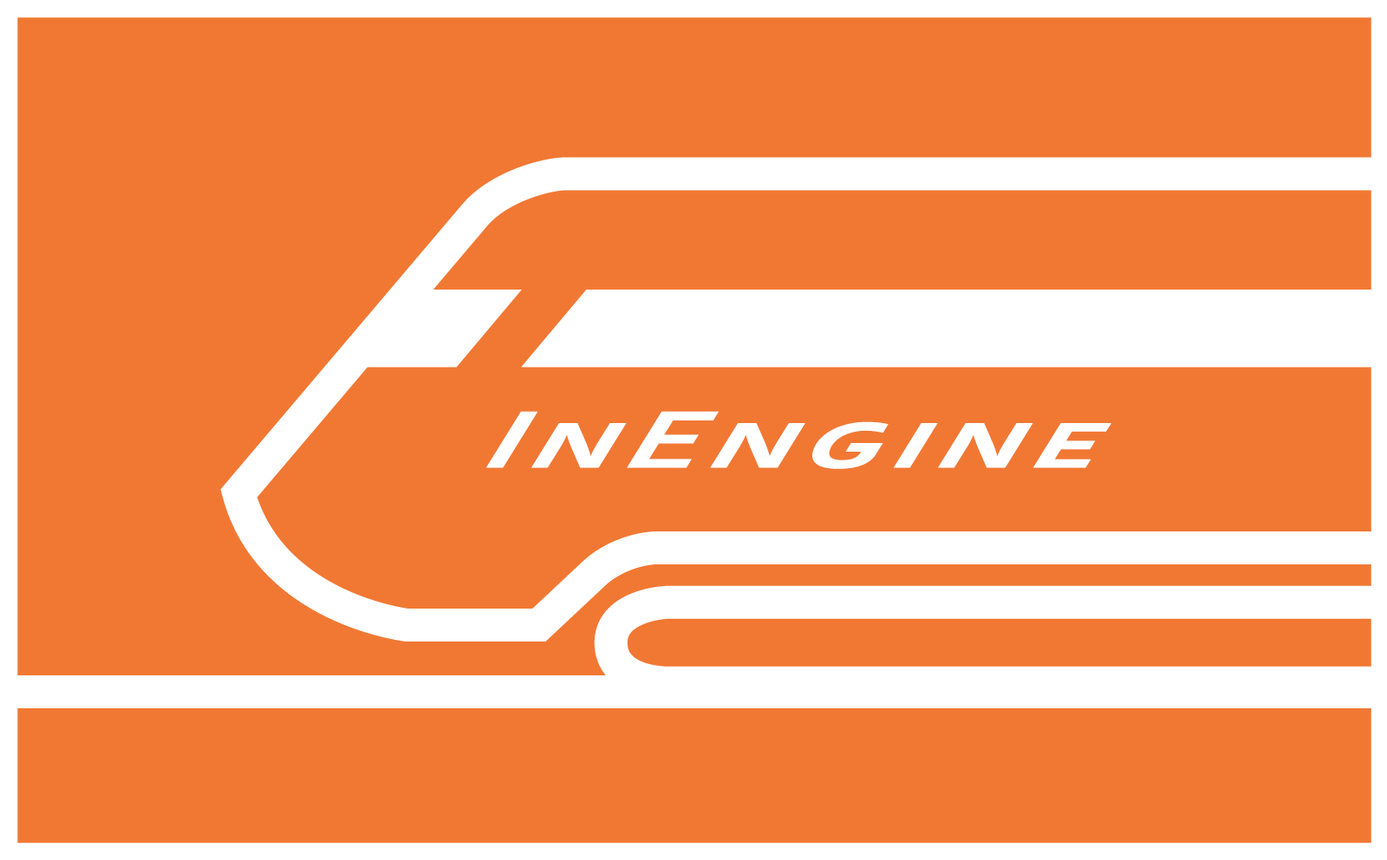
<style>
.page{position:relative;width:1387px;height:860px;background:#f17833}
.page>*{position:absolute;margin:0}
.t1{font:85.6px "Corbel-BoldItalic";letter-spacing:0.06em;color:#ffffff;font-variant:small-caps;font-style:italic;scale:1.62 1}
</style>
<div class="page">
<p class="t1" style="left:486px;top:411px;width:625px;height:58px">InEngine</p>
</div>
